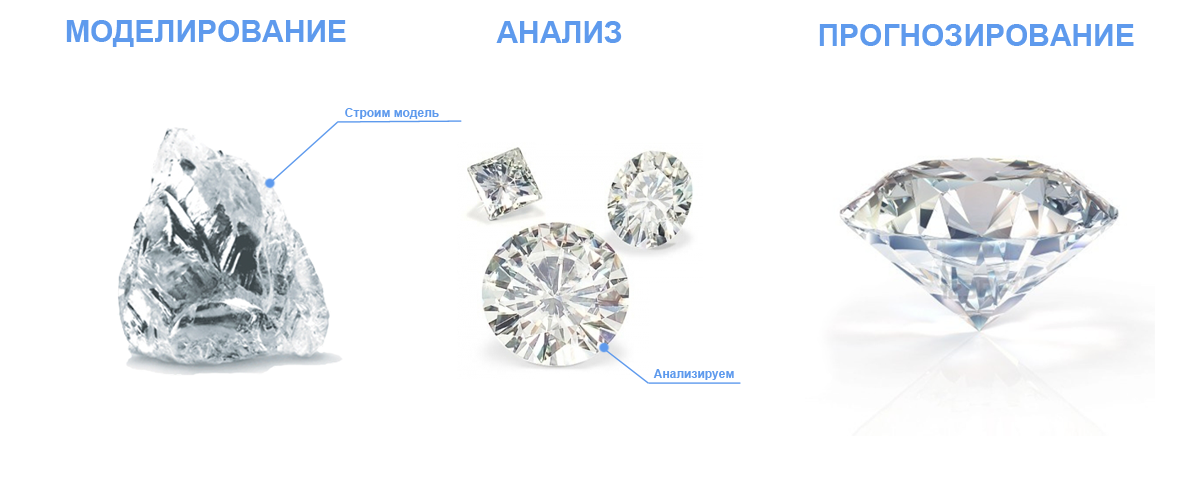
<style>
.page{position:relative;width:1200px;height:500px;background:#ffffff}
.page>*{position:absolute;margin:0}
.t1{font:30px "Arial-BoldMT";color:#5e9aed}
.t2{font:12px "Arial-BoldMT";color:#5e9aed}
</style>
<div class="page">
<p class="t1" style="left:66px;top:20px;width:280px;height:27px">МОДЕЛИРОВАНИЕ</p>
<p class="t1" style="left:496px;top:21px;width:126px;height:22px">АНАЛИЗ</p>
<p class="t1" style="left:819px;top:24px;width:315px;height:22px">ПРОГНОЗИРОВАНИЕ</p>
<p class="t2" style="left:345px;top:108px;width:94px;height:11px">Строим модель</p>
<p class="t2" style="left:653px;top:369px;width:81px;height:11px">Анализируем</p>
</div>
